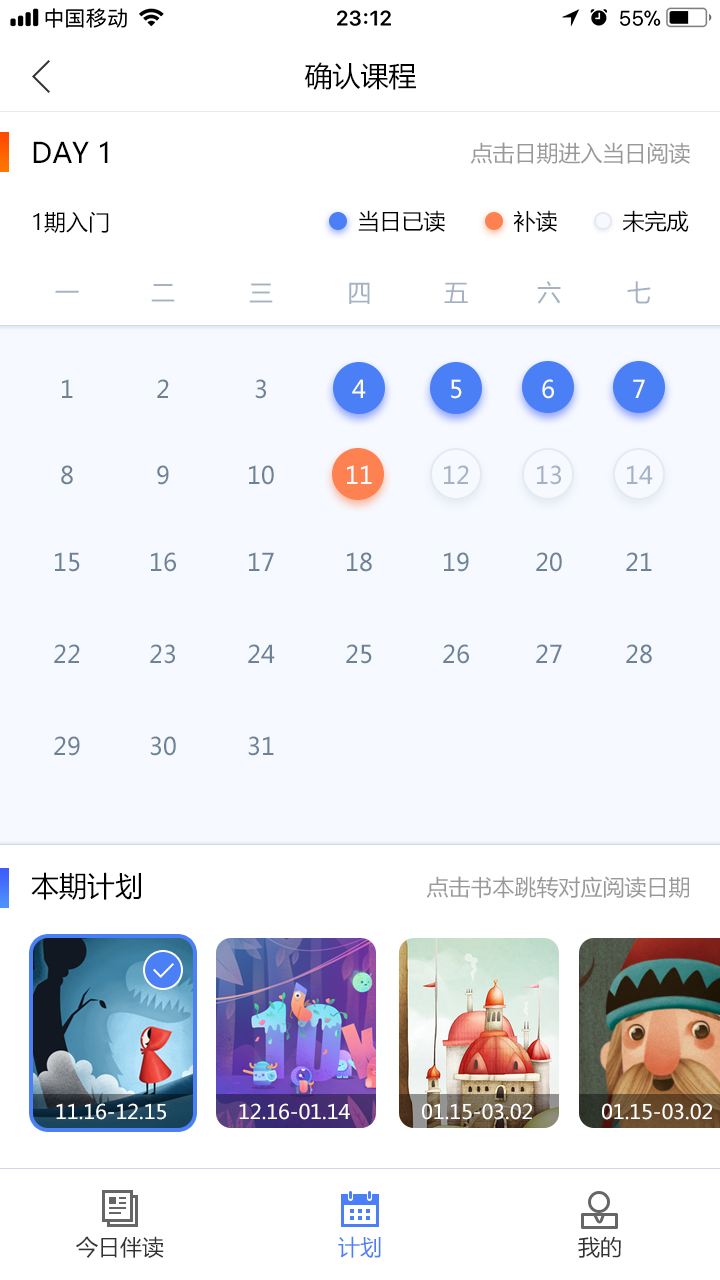
<style>
.page{position:relative;width:720px;height:1280px;background:#ffffff}
.page>*{position:absolute;margin:0}
.t1{font:28px "MicrosoftYaHei";color:#000000}
.t2{font:22px "MicrosoftYaHei";color:#999999}
.t3{font:22px "MicrosoftYaHei";color:#000000}
.t4{font:24px "MicrosoftYaHei";color:#a4b2c3}
.t5{font:24px "MicrosoftYaHei";color:#6f8294}
.t6{font:24px "MicrosoftYaHei";color:#ffffff}
.t7{font:24px "MicrosoftYaHei";color:#feffff}
.t8{font:20px "MicrosoftYaHei";color:#ffffff}
.t9{font:22px "MicrosoftYaHei";color:#333333}
.t10{font:22px "MicrosoftYaHei";color:#4b7ff5}
</style>
<div class="page">
<p class="t1" style="left:304px;top:62px;width:112px;height:28px">确认课程</p>
<p class="t1" style="left:33px;top:141px;width:75px;height:22px">DAY 1</p>
<p class="t2" style="left:470px;top:142px;width:220px;height:22px">点击日期进入当日阅读</p>
<p class="t3" style="left:33px;top:211px;width:76px;height:22px">1期入门</p>
<p class="t3" style="left:358px;top:210px;width:87px;height:22px">当日已读</p>
<p class="t3" style="left:513px;top:210px;width:44px;height:22px">补读</p>
<p class="t3" style="left:622px;top:210px;width:67px;height:22px">未完成</p>
<p class="t4" style="left:537px;top:281px;width:24px;height:23px">六</p>
<p class="t4" style="left:627px;top:281px;width:24px;height:23px">七</p>
<p class="t4" style="left:55px;top:290px;width:24px;height:3px">一</p>
<p class="t4" style="left:151px;top:284px;width:24px;height:18px">二</p>
<p class="t4" style="left:249px;top:283px;width:24px;height:20px">三</p>
<p class="t4" style="left:349px;top:282px;width:21px;height:22px">四</p>
<p class="t4" style="left:444px;top:282px;width:24px;height:21px">五</p>
<p class="t5" style="left:62px;top:379px;width:11px;height:19px">1</p>
<p class="t5" style="left:157px;top:379px;width:12px;height:19px">2</p>
<p class="t5" style="left:255px;top:379px;width:11px;height:20px">3</p>
<p class="t6" style="left:352px;top:379px;width:14px;height:19px">4</p>
<p class="t7" style="left:451px;top:379px;width:11px;height:20px">5</p>
<p class="t6" style="left:542px;top:379px;width:12px;height:20px">6</p>
<p class="t6" style="left:633px;top:379px;width:12px;height:19px">7</p>
<p class="t5" style="left:61px;top:465px;width:12px;height:20px">8</p>
<p class="t5" style="left:157px;top:465px;width:12px;height:20px">9</p>
<p class="t5" style="left:249px;top:465px;width:25px;height:20px">10</p>
<p class="t6" style="left:347px;top:465px;width:25px;height:19px">11</p>
<p class="t4" style="left:444px;top:465px;width:25px;height:19px">12</p>
<p class="t4" style="left:537px;top:465px;width:24px;height:20px">13</p>
<p class="t4" style="left:627px;top:465px;width:26px;height:19px">14</p>
<p class="t5" style="left:55px;top:552px;width:25px;height:20px">15</p>
<p class="t5" style="left:151px;top:552px;width:25px;height:20px">16</p>
<p class="t5" style="left:249px;top:552px;width:25px;height:19px">17</p>
<p class="t5" style="left:347px;top:552px;width:25px;height:20px">18</p>
<p class="t5" style="left:444px;top:552px;width:25px;height:20px">19</p>
<p class="t5" style="left:536px;top:552px;width:26px;height:20px">20</p>
<p class="t5" style="left:626px;top:552px;width:26px;height:19px">21</p>
<p class="t5" style="left:54px;top:644px;width:26px;height:19px">22</p>
<p class="t5" style="left:150px;top:644px;width:25px;height:20px">23</p>
<p class="t5" style="left:248px;top:644px;width:27px;height:19px">24</p>
<p class="t5" style="left:346px;top:644px;width:26px;height:20px">25</p>
<p class="t5" style="left:443px;top:644px;width:26px;height:20px">26</p>
<p class="t5" style="left:536px;top:644px;width:26px;height:19px">27</p>
<p class="t5" style="left:626px;top:644px;width:26px;height:20px">28</p>
<p class="t5" style="left:54px;top:736px;width:26px;height:20px">29</p>
<p class="t5" style="left:150px;top:736px;width:26px;height:20px">30</p>
<p class="t5" style="left:248px;top:736px;width:26px;height:20px">31</p>
<p class="t1" style="left:31px;top:872px;width:110px;height:28px">本期计划</p>
<p class="t2" style="left:426px;top:876px;width:263px;height:22px">点击书本跳转对应阅读日期</p>
<p class="t8" style="left:56px;top:1103px;width:110px;height:17px">11.16-12.15</p>
<p class="t8" style="left:239px;top:1103px;width:111px;height:17px">12.16-01.14</p>
<p class="t8" style="left:422px;top:1103px;width:110px;height:17px">01.15-03.02</p>
<p class="t8" style="left:602px;top:1103px;width:110px;height:17px">01.15-03.02</p>
<p class="t9" style="left:76px;top:1236px;width:88px;height:22px">今日伴读</p>
<p class="t10" style="left:338px;top:1236px;width:43px;height:22px">计划</p>
<p class="t9" style="left:578px;top:1236px;width:43px;height:22px">我的</p>
</div>
